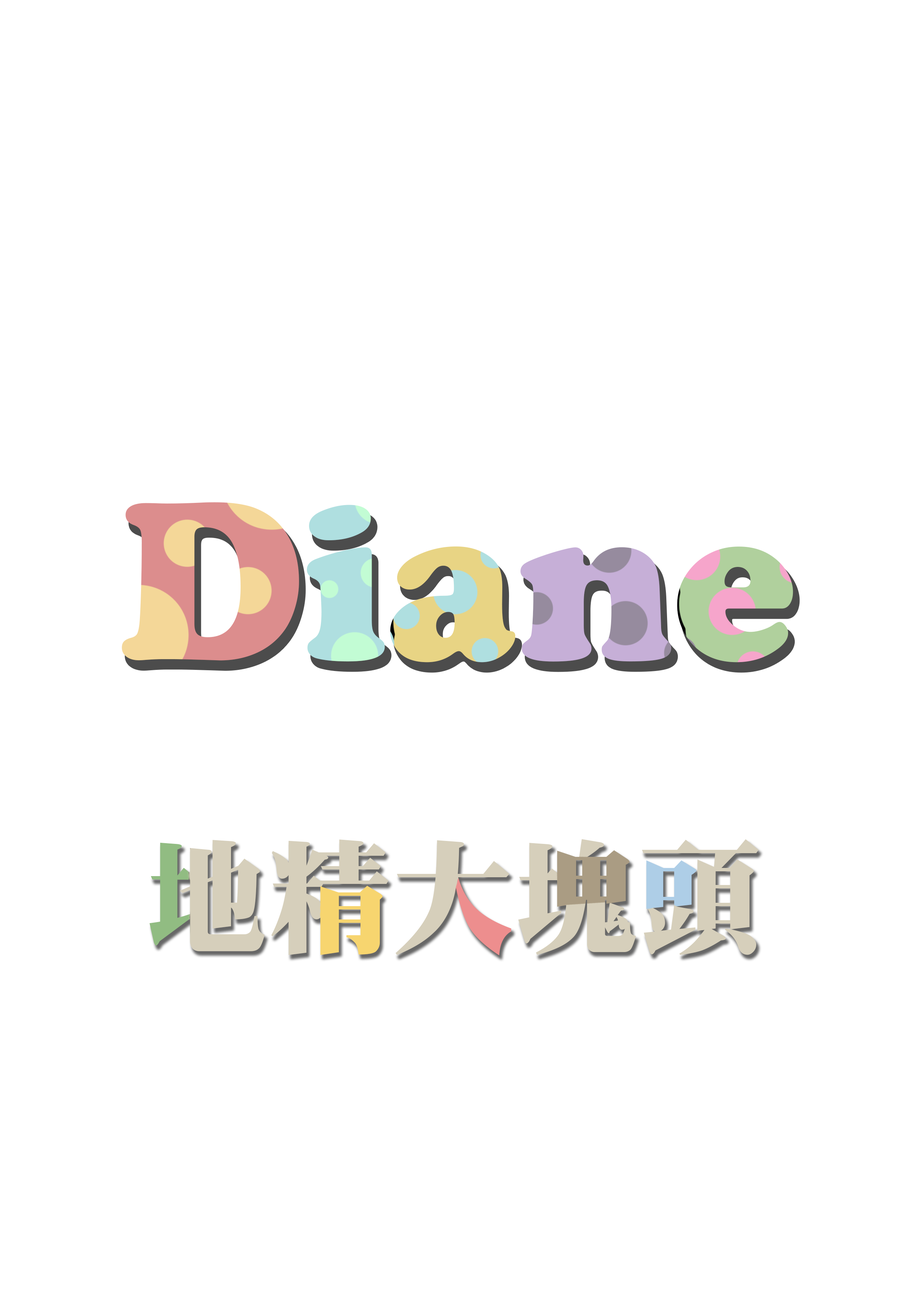
<style>
.page{position:relative;width:918px;height:1299px;background:#ffffff}
.page>*{position:absolute;margin:0}
.t1{font:231.4px "CooperBlack"}
.t2{font:123.4px "DFMing-W12-WINP-BF";color:#d6cfbb}
</style>
<div class="page">
<p class="t1" style="left:122px;top:502px;width:671px;height:160px">Diane</p>
<p class="t2" style="left:150px;top:839px;width:609px;height:116px">地精大塊頭</p>
</div>
